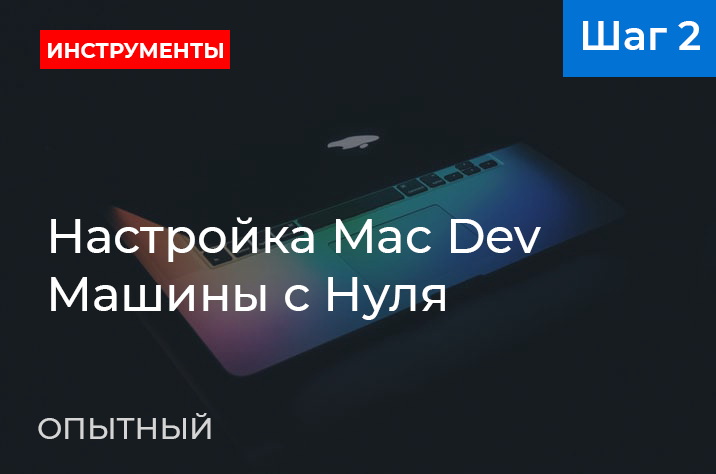
<style>
.page{position:relative;width:716px;height:474px;background:#161c20}
.page>*{position:absolute;margin:0}
.t1{font:40px "Montserrat-SemiBold";color:#ffffff}
.t2{font:22px "Montserrat-Bold";color:#ffffff;scale:0.95 1}
.t3{font:48px "Montserrat-Medium";color:#ffffff}
.t4{font:30px "Montserrat-Medium";color:#d5d5d5}
</style>
<div class="page">
<p class="t1" style="left:583px;top:21px;width:117px;height:29px">Шаг 2</p>
<p class="t2" style="left:48px;top:43px;width:175px;height:15px">ИНСТРУМЕНТЫ</p>
<p class="t3" style="left:51px;top:217px;width:490px;height:103px">Настройка Mac Dev <br>Машины с Нуля</p>
<p class="t4" style="left:38px;top:413px;width:173px;height:26px">ОПЫТНЫЙ</p>
</div>
